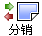
<style>
.page{position:relative;width:42px;height:36px;background:#ffffff}
.page>*{position:absolute;margin:0}
.t1{font:12px "SimSun";letter-spacing:0.02em;color:#000000}
</style>
<div class="page">
<p class="t1" style="left:9px;top:24px;width:23px;height:11px">分销</p>
</div>
